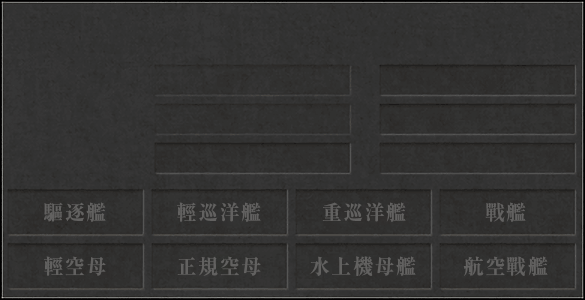
<style>
.page{position:relative;width:585px;height:300px}
.page>*{position:absolute;margin:0}
.t1{font:20.6px "RyuminPro-ExBold";letter-spacing:0.075em;color:#656463}
</style>
<div class="page">
<p class="t1" style="left:44px;top:202px;width:62px;height:20px">驅逐艦</p>
<p class="t1" style="left:177px;top:202px;width:84px;height:20px">輕巡洋艦</p>
<p class="t1" style="left:322px;top:202px;width:84px;height:20px">重巡洋艦</p>
<p class="t1" style="left:485px;top:202px;width:41px;height:20px">戰艦</p>
<p class="t1" style="left:44px;top:256px;width:62px;height:20px">輕空母</p>
<p class="t1" style="left:177px;top:256px;width:84px;height:20px">正規空母</p>
<p class="t1" style="left:310px;top:256px;width:106px;height:20px">水上機母艦</p>
<p class="t1" style="left:463px;top:256px;width:85px;height:20px">航空戰艦</p>
</div>
